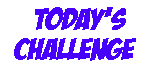
<style>
.page{position:relative;width:155px;height:68px;background:#ffffff}
.page>*{position:absolute;margin:0}
.t1{font:29.5px "BadaBoomBB";color:#4700fa;scale:1.15 1}
</style>
<div class="page">
<p class="t1" style="left:35px;top:7px;width:91px;height:23px">TODAY’S</p>
<p class="t1" style="left:14px;top:38px;width:122px;height:23px">CHALLENGE</p>
</div>
